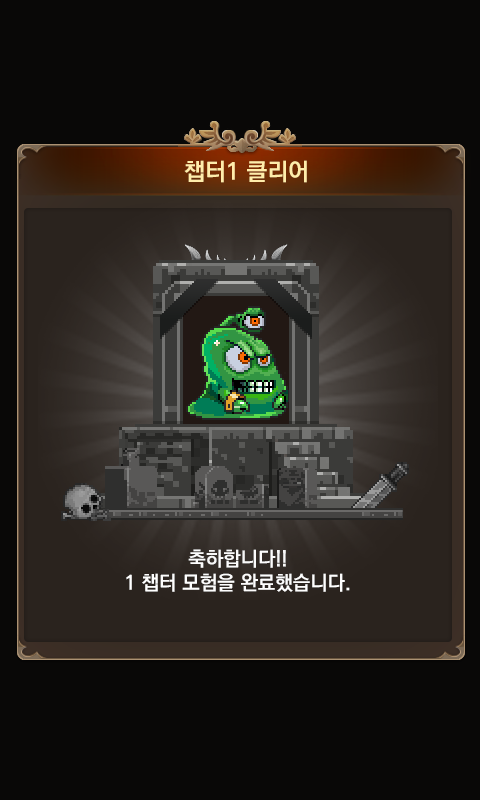
<style>
.page{position:relative;width:480px;height:800px;background:#090807}
.page>*{position:absolute;margin:0}
.t1{font:24px "KoPubDotumBold";color:#ffedab}
.t2{font:20px "KoPubDotumBold";color:#ffffff}
</style>
<div class="page">
<p class="t1" style="left:184px;top:160px;width:123px;height:23px">챕터1 클리어</p>
<p class="t2" style="left:126px;top:549px;width:224px;height:43px;text-align:center">축하합니다!!<br>1 챕터 모험을 완료했습니다.</p>
</div>
